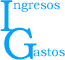
<style>
.page{position:relative;width:65px;height:60px;background:#ffffff}
.page>*{position:absolute;margin:0}
.t1{font:45px "BookmanOldStyle";color:#04a2fc}
.t2{font:12.5px "BookmanOldStyle";color:#04a2fc}
</style>
<div class="page">
<p class="t1" style="left:0px;top:0px;width:13px;height:31px">I</p>
<p class="t2" style="left:13px;top:2px;width:47px;height:10px">ngresos</p>
<p class="t1" style="left:4px;top:27px;width:33px;height:33px">G</p>
<p class="t2" style="left:33px;top:48px;width:32px;height:9px">astos</p>
</div>
